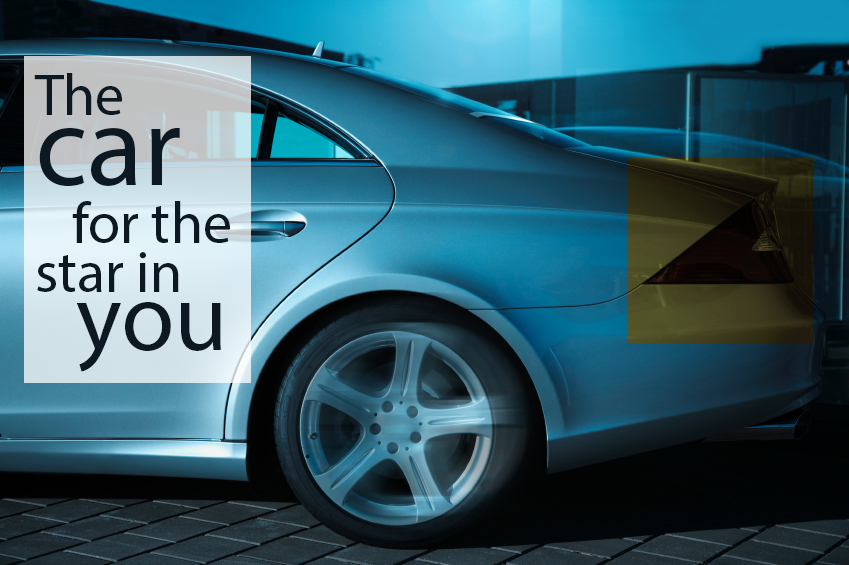
<style>
.page{position:relative;width:849px;height:565px}
.page>*{position:absolute;margin:0}
.t1{font:58.3px/58.4px "MyriadPro-Regular";color:#0d1922}
.t2{font:58.3px "MyriadPro-Regular";color:#0d1922}
.t3{font:116.7px/0px "MyriadPro-Regular";color:#0d1922}
.t4{font:58.3px/48.7px "MyriadPro-Regular";color:#0d1922}
.t5{font:97.2px/58.4px "MyriadPro-Regular";color:#0d1922}
</style>
<div class="page">
<p class="t1" style="left:34px;top:73px;width:196px;height:299px"><span class="t2">The </span><span class="t3">car <br></span>   for the <span class="t4">star in<br></span><span class="t5">  you</span></p>
</div>
